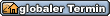
<style>
.page{position:relative;width:110px;height:16px}
.page>*{position:absolute;margin:0}
.t1{font:10px "Arial-Black";color:#ffffff}
</style>
<div class="page">
<p class="t1" style="left:19px;top:4px;width:86px;height:11px">globaler Termin</p>
</div>
